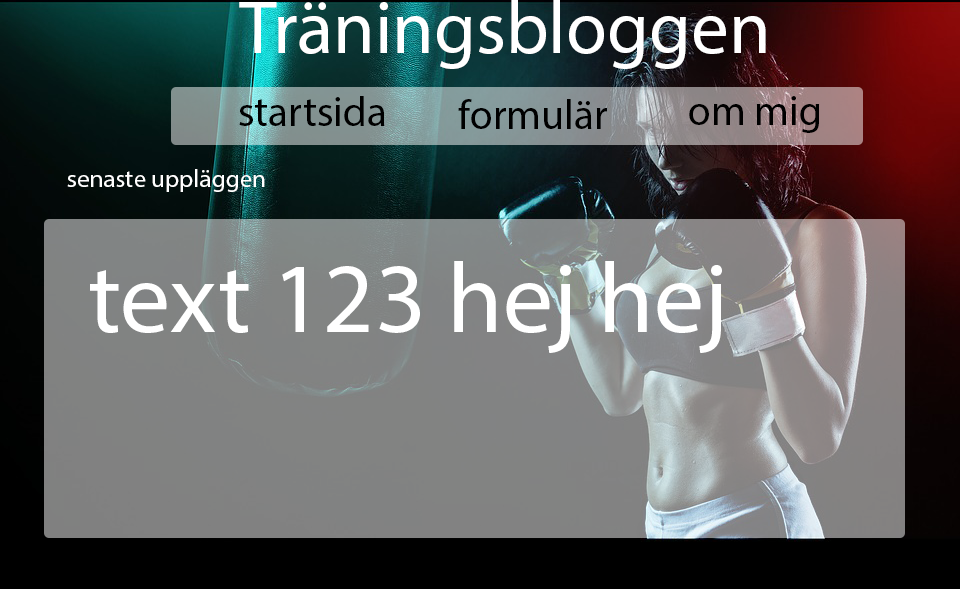
<style>
.page{position:relative;width:960px;height:589px}
.page>*{position:absolute;margin:0}
.t1{font:75px "MyriadPro-Regular";color:#ffffff}
.t2{font:41.7px "MyriadPro-Regular";color:#000000}
.t3{font:25px "MyriadPro-Regular";color:#ffffff}
.t4{font:100px "MyriadPro-Regular";color:#ffffff}
</style>
<div class="page">
<p class="t1" style="left:239px;top:0px;width:527px;height:69px">Träningsbloggen</p>
<p class="t2" style="left:239px;top:96px;width:146px;height:30px">startsida</p>
<p class="t2" style="left:458px;top:99px;width:149px;height:30px">formulär</p>
<p class="t2" style="left:689px;top:96px;width:131px;height:37px">om mig</p>
<p class="t3" style="left:67px;top:169px;width:198px;height:23px">senaste uppläggen</p>
<p class="t4" style="left:90px;top:261px;width:632px;height:92px">text 123 hej hej</p>
</div>
